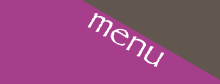
<style>
.page{position:relative;width:220px;height:84px;background:#a63e8b}
.page>*{position:absolute;margin:0}
.t1{font:36px "Papyrus";color:#fefefe}
</style>
<div class="page">
<p class="t1" style="left:87px;top:13px;width:77px;height:54px;rotate:31deg">menu</p>
</div>
